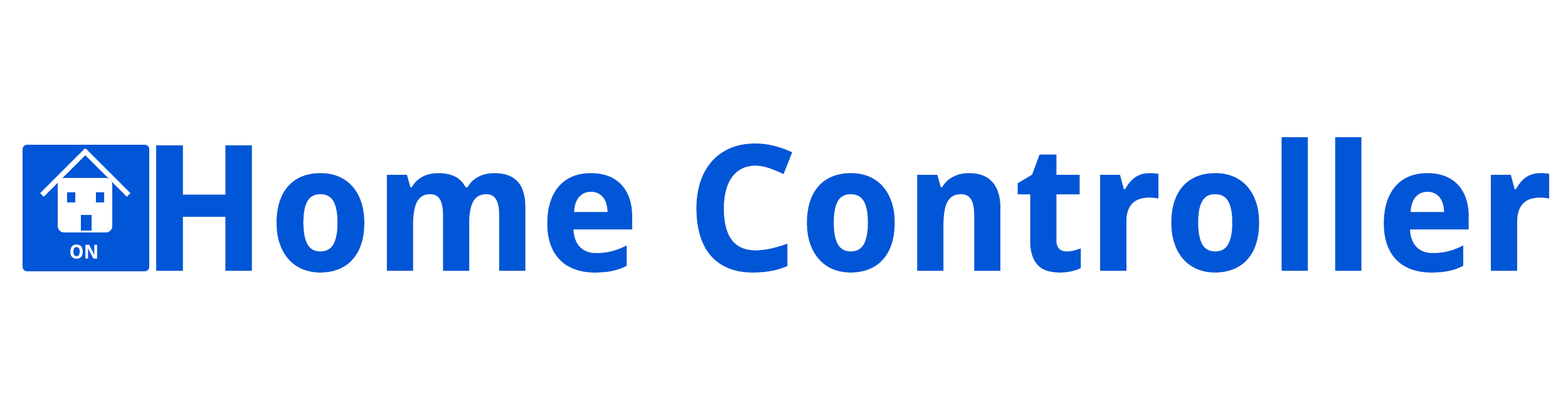
<style>
.page{position:relative;width:1568px;height:401px;background:#ffffff}
.page>*{position:absolute;margin:0}
.t1{font:175.8px "DroidSans-Bold";color:#0056d6}
.t2{font:19.2px "DroidSans-Bold";color:#ffffff}
</style>
<div class="page">
<p class="t1" style="left:156px;top:137px;width:1393px;height:136px">Home Controller</p>
<p class="t2" style="left:70px;top:245px;width:27px;height:14px">ON</p>
</div>
